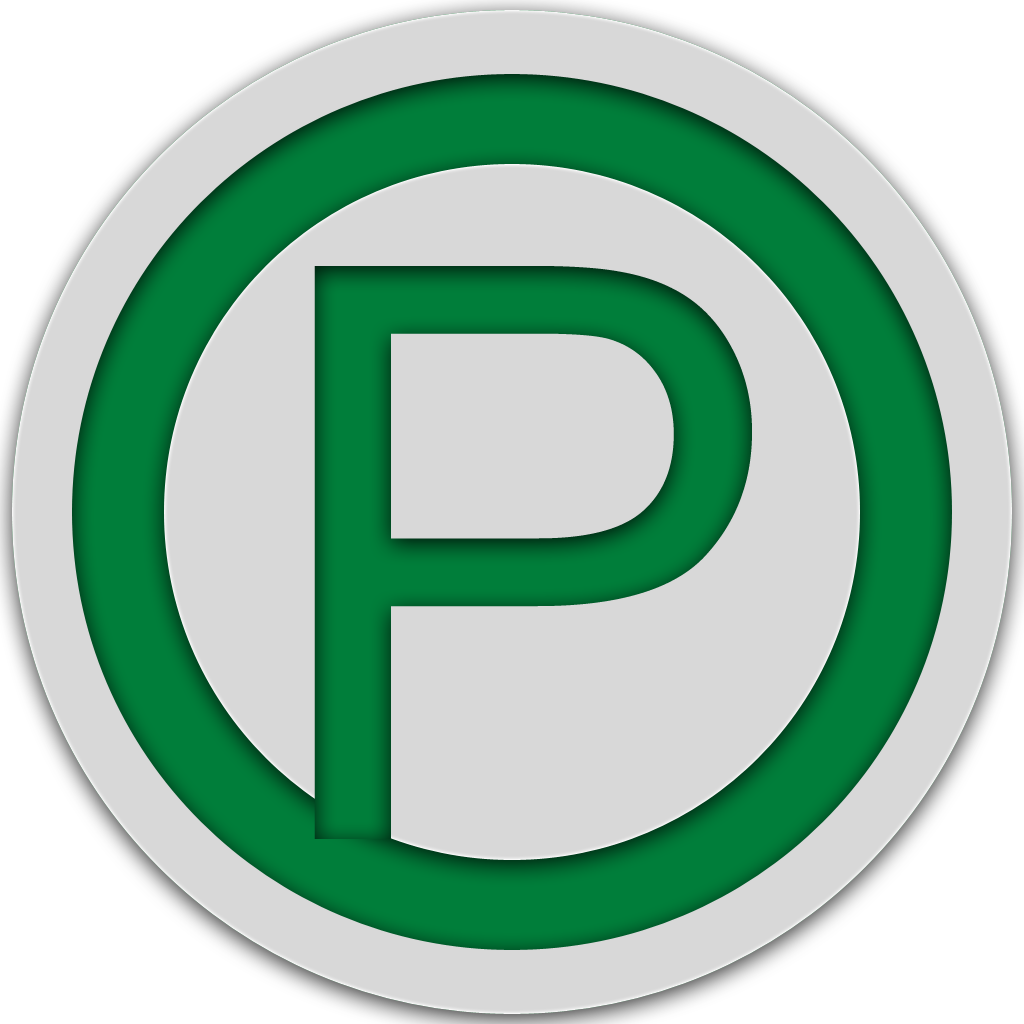
<style>
.page{position:relative;width:1024px;height:1024px;background:#d8d8d8}
.page>*{position:absolute;margin:0}
.t1{font:800px "ArialMT";color:#007b38}
</style>
<div class="page">
<p class="t1" style="left:314px;top:266px;width:438px;height:573px">P</p>
</div>
